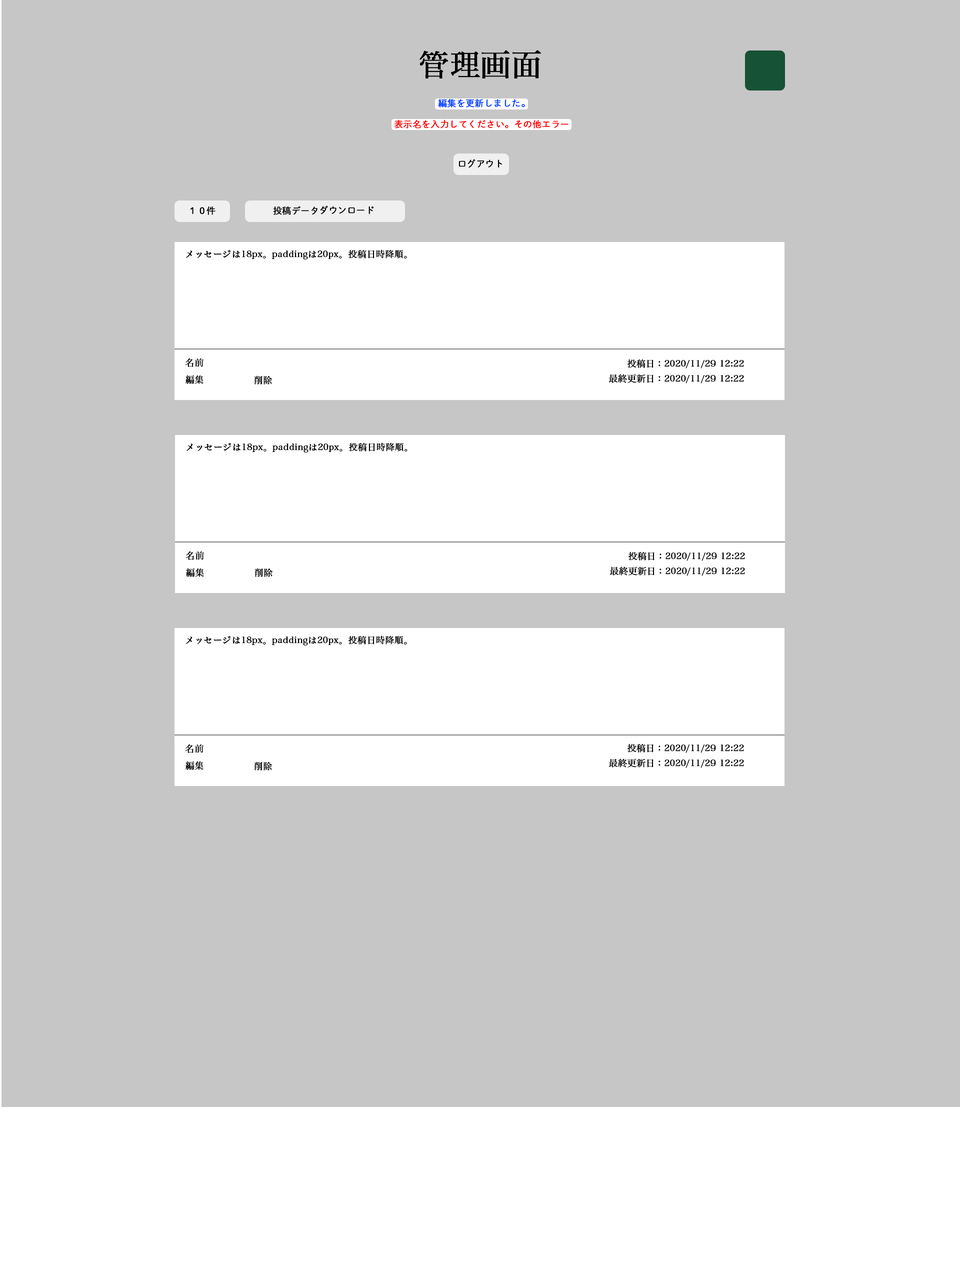
<style>
.page{position:relative;width:960px;height:1283px;background:#c6c6c6}
.page>*{position:absolute;margin:0}
.t1{font:30px "HiraMinPro-W3";color:#000000;font-weight:bold}
.t2{font:9px "DNPShueiMGoStd-L";color:#0042ff;font-weight:bold}
.t3{font:9px "DNPShueiMGoStd-L";color:#ff0000;font-weight:bold}
.t4{font:9px "DNPShueiMGoStd-L";color:#000000;font-weight:bold}
.t5{font:9px "HiraMinPro-W3";color:#000000;font-weight:bold}
</style>
<div class="page">
<p class="t1" style="left:420px;top:50px;width:121px;height:28px">管理画面</p>
<p class="t2" style="left:438px;top:98px;width:87px;height:10px">編集を更新しました。</p>
<p class="t3" style="left:394px;top:120px;width:174px;height:8px">表示名を入力してください。その他エラー</p>
<p class="t4" style="left:458px;top:159px;width:44px;height:9px">ログアウト</p>
<p class="t4" style="left:190px;top:206px;width:26px;height:9px">１０件</p>
<p class="t4" style="left:273px;top:206px;width:101px;height:9px">投稿データダウンロード</p>
<p class="t5" style="left:186px;top:250px;width:221px;height:10px">メッセージは18px。paddingは20px。投稿日時降順。</p>
<p class="t5" style="left:185px;top:358px;width:19px;height:9px">名前</p>
<p class="t5" style="left:628px;top:359px;width:116px;height:9px">投稿日：2020/11/29 12:22</p>
<p class="t5" style="left:186px;top:375px;width:18px;height:9px">編集</p>
<p class="t5" style="left:254px;top:376px;width:18px;height:8px">削除</p>
<p class="t5" style="left:608px;top:374px;width:136px;height:10px">最終更新日：2020/11/29 12:22</p>
<p class="t5" style="left:186px;top:442px;width:222px;height:10px">メッセージは18px。paddingは20px。投稿日時降順。</p>
<p class="t5" style="left:186px;top:551px;width:18px;height:9px">名前</p>
<p class="t5" style="left:628px;top:552px;width:117px;height:9px">投稿日：2020/11/29 12:22</p>
<p class="t5" style="left:186px;top:568px;width:18px;height:9px">編集</p>
<p class="t5" style="left:255px;top:568px;width:18px;height:9px">削除</p>
<p class="t5" style="left:610px;top:566px;width:135px;height:10px">最終更新日：2020/11/29 12:22</p>
<p class="t5" style="left:186px;top:636px;width:221px;height:10px">メッセージは18px。paddingは20px。投稿日時降順。</p>
<p class="t5" style="left:185px;top:744px;width:19px;height:9px">名前</p>
<p class="t5" style="left:628px;top:744px;width:116px;height:9px">投稿日：2020/11/29 12:22</p>
<p class="t5" style="left:186px;top:761px;width:18px;height:9px">編集</p>
<p class="t5" style="left:254px;top:762px;width:18px;height:8px">削除</p>
<p class="t5" style="left:608px;top:758px;width:136px;height:10px">最終更新日：2020/11/29 12:22</p>
</div>
